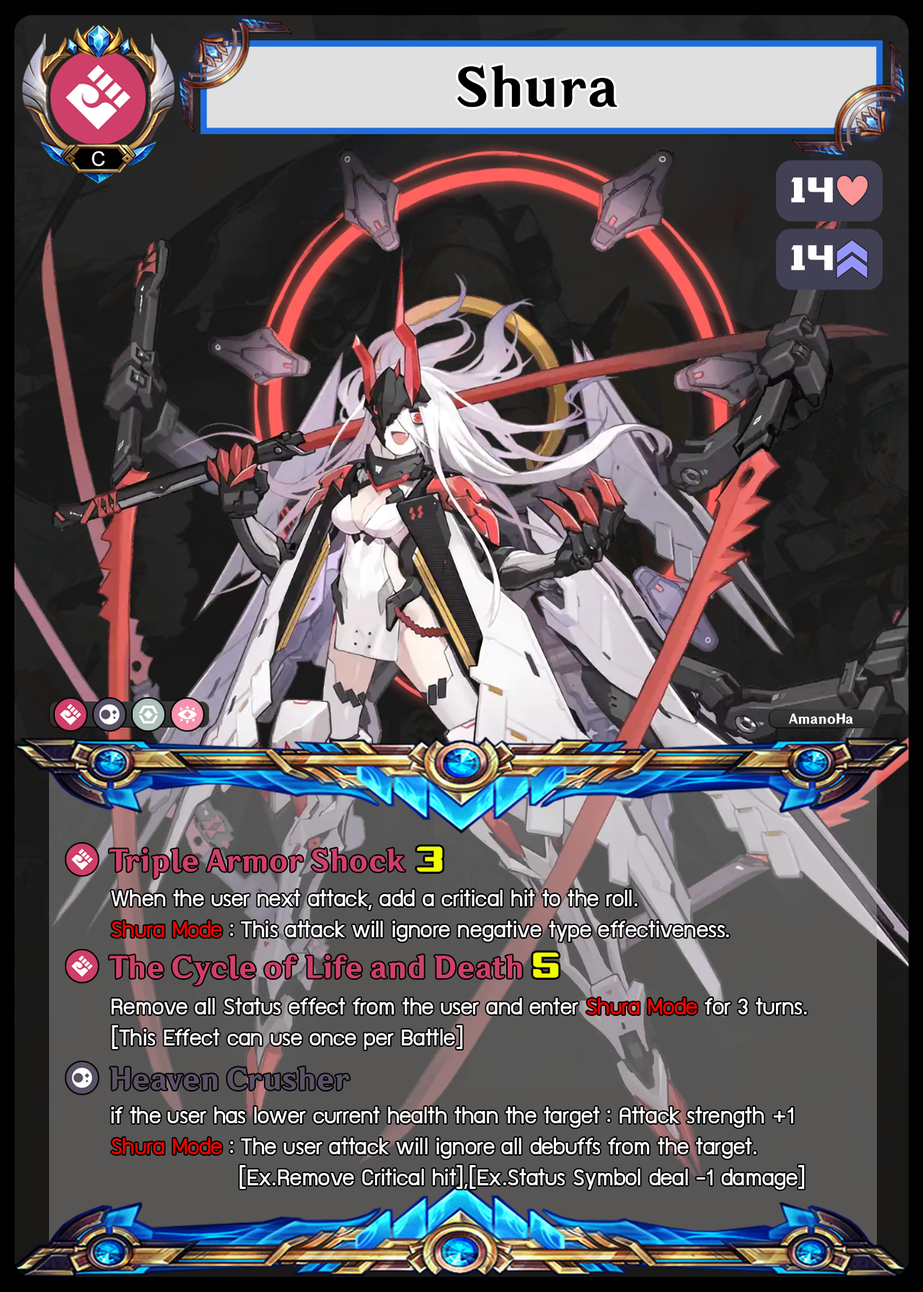
<style>
.page{position:relative;width:923px;height:1292px}
.page>*{position:absolute;margin:0}
.t1{font:51.3px "HYWenHei-HEW";color:#000000}
.t2{font:20.2px "ArialMT";color:#ffffff}
.t3{font:34.9px "LaOrientalBold";color:#ffffff}
.t4{font:12.8px "HYWenHei-HEW";color:#ffffff}
.t5{font:28.2px "HYWenHei-HEW";color:#ce4069}
.t6{font:35.9px "LaOrientalBold";color:#f0ff00}
.t7{font:25.6px "supermarket";color:#ffffff}
.t8{font:25.6px "supermarket";color:#f40000}
.t9{font:25.6px "supermarket";color:#ff0000}
.t10{font:28.2px "HYWenHei-HEW";color:#5a5366}
</style>
<div class="page">
<p class="t1" style="left:457px;top:65px;width:160px;height:42px">Shura</p>
<p class="t2" style="left:92px;top:151px;width:13px;height:16px">C</p>
<p class="t3" style="left:791px;top:177px;width:42px;height:26px">14</p>
<p class="t3" style="left:791px;top:245px;width:42px;height:25px">14</p>
<p class="t4" style="left:789px;top:713px;width:64px;height:11px">AmanoHa</p>
<p class="t5" style="left:109px;top:848px;width:296px;height:31px">Triple Armor Shock</p>
<p class="t6" style="left:417px;top:846px;width:26px;height:26px">3</p>
<p class="t7" style="left:111px;top:890px;width:618px;height:52px">When the user next attack, add a critical hit to the roll.<br><span class="t8">Shura Mode</span> : This attack will ignore negative type effectiveness.</p>
<p class="t6" style="left:533px;top:952px;width:26px;height:26px">5</p>
<p class="t5" style="left:109px;top:955px;width:413px;height:31px">The Cycle of Life and Death</p>
<p class="t7" style="left:111px;top:998px;width:696px;height:52px">Remove all Status effect from the user and enter <span class="t9">Shura Mode </span>for 3 turns.<br>[This Effect can use once per Battle]</p>
<p class="t10" style="left:110px;top:1066px;width:240px;height:24px">Heaven Crusher</p>
<p class="t7" style="left:111px;top:1107px;width:694px;height:83px">if the user has lower current health than the target : Attack strength +1  <br><span class="t8">Shura Mode</span> : The user attack will ignore all debuffs from the target. <br>                  [Ex.Remove Critical hit],[Ex.Status Symbol deal -1 damage]</p>
</div>
